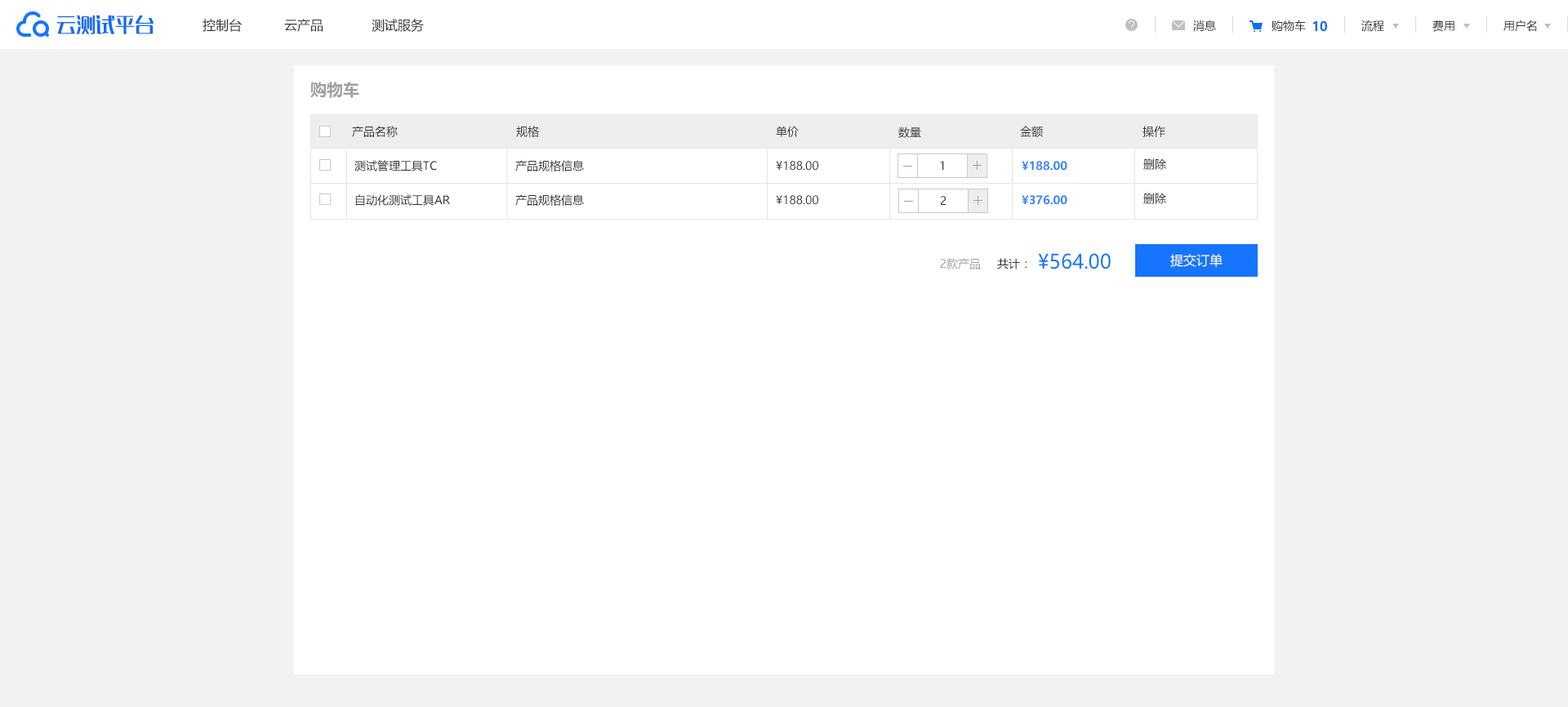
<style>
.page{position:relative;width:1568px;height:707px;background:#ffffff}
.page>*{position:absolute;margin:0}
.t1{font:19.6px "MFLangQian_Noncommercial-Regular";color:#136df3}
.t2{font:13.1px "MicrosoftYaHei";color:#313131}
.t3{font:11.4px "MicrosoftYaHei";color:#313131}
.t4{font:13.1px "MicrosoftYaHei-Bold";color:#136df3}
.t5{font:16.3px "MicrosoftYaHei-Bold";color:#a0a0a0}
.t6{font:11.4px "MicrosoftYaHei-Bold";color:#3884fe}
.t7{font:19.6px "MicrosoftYaHei";color:#1674ff}
.t8{font:13.1px "MicrosoftYaHei";color:#ffffff}
.t9{font:11.4px "MicrosoftYaHei";color:#a0a0a0}
</style>
<div class="page">
<p class="t1" style="left:56px;top:15px;width:98px;height:19px">云测试平台</p>
<p class="t2" style="left:203px;top:19px;width:39px;height:13px">控制台</p>
<p class="t2" style="left:284px;top:19px;width:39px;height:13px">云产品</p>
<p class="t2" style="left:372px;top:19px;width:52px;height:13px">测试服务</p>
<p class="t3" style="left:1193px;top:20px;width:23px;height:12px">消息</p>
<p class="t3" style="left:1272px;top:20px;width:34px;height:12px">购物车</p>
<p class="t4" style="left:1312px;top:20px;width:15px;height:12px">10</p>
<p class="t3" style="left:1361px;top:20px;width:23px;height:12px">流程</p>
<p class="t3" style="left:1432px;top:20px;width:22px;height:12px">费用</p>
<p class="t3" style="left:1503px;top:20px;width:34px;height:12px">用户名</p>
<p class="t5" style="left:310px;top:82px;width:49px;height:16px">购物车</p>
<p class="t3" style="left:352px;top:126px;width:46px;height:11px">产品名称</p>
<p class="t3" style="left:516px;top:126px;width:23px;height:11px">规格</p>
<p class="t3" style="left:776px;top:126px;width:23px;height:11px">单价</p>
<p class="t3" style="left:1020px;top:126px;width:23px;height:11px">金额</p>
<p class="t3" style="left:1143px;top:126px;width:22px;height:11px">操作</p>
<p class="t3" style="left:898px;top:127px;width:23px;height:11px">数量</p>
<p class="t3" style="left:354px;top:160px;width:83px;height:12px">测试管理工具TC</p>
<p class="t3" style="left:515px;top:160px;width:69px;height:12px">产品规格信息</p>
<p class="t3" style="left:776px;top:161px;width:42px;height:10px">¥188.00</p>
<p class="t3" style="left:940px;top:161px;width:4px;height:9px">1</p>
<p class="t6" style="left:1022px;top:161px;width:45px;height:10px">¥188.00</p>
<p class="t3" style="left:1143px;top:158px;width:23px;height:12px">删除</p>
<p class="t3" style="left:355px;top:194px;width:95px;height:12px">自动化测试工具AR</p>
<p class="t3" style="left:515px;top:194px;width:69px;height:12px">产品规格信息</p>
<p class="t3" style="left:776px;top:195px;width:42px;height:10px">¥188.00</p>
<p class="t3" style="left:940px;top:196px;width:7px;height:9px">2</p>
<p class="t6" style="left:1022px;top:195px;width:45px;height:10px">¥376.00</p>
<p class="t3" style="left:1143px;top:193px;width:23px;height:11px">删除</p>
<p class="t7" style="left:1038px;top:253px;width:73px;height:17px">¥564.00</p>
<p class="t8" style="left:1170px;top:254px;width:53px;height:13px">提交订单</p>
<p class="t9" style="left:940px;top:258px;width:40px;height:12px">2款产品</p>
<p class="t3" style="left:997px;top:258px;width:30px;height:12px">共计：</p>
</div>
